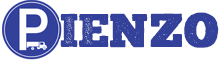
<style>
.page{position:relative;width:220px;height:60px;background:#ffffff}
.page>*{position:absolute;margin:0}
.t1{font:48px "ChunkFivePrint";color:#33419b}
</style>
<div class="page">
<p class="t1" style="left:60px;top:12px;width:159px;height:36px">IENZO</p>
</div>
